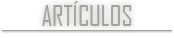
<style>
.page{position:relative;width:174px;height:38px;background:#ffffff}
.page>*{position:absolute;margin:0}
.t1{font:26.6px "AgencyFB-Reg";color:#a3a2a0}
</style>
<div class="page">
<p class="t1" style="left:42px;top:1px;width:90px;height:25px">ARTÍCULOS</p>
</div>
